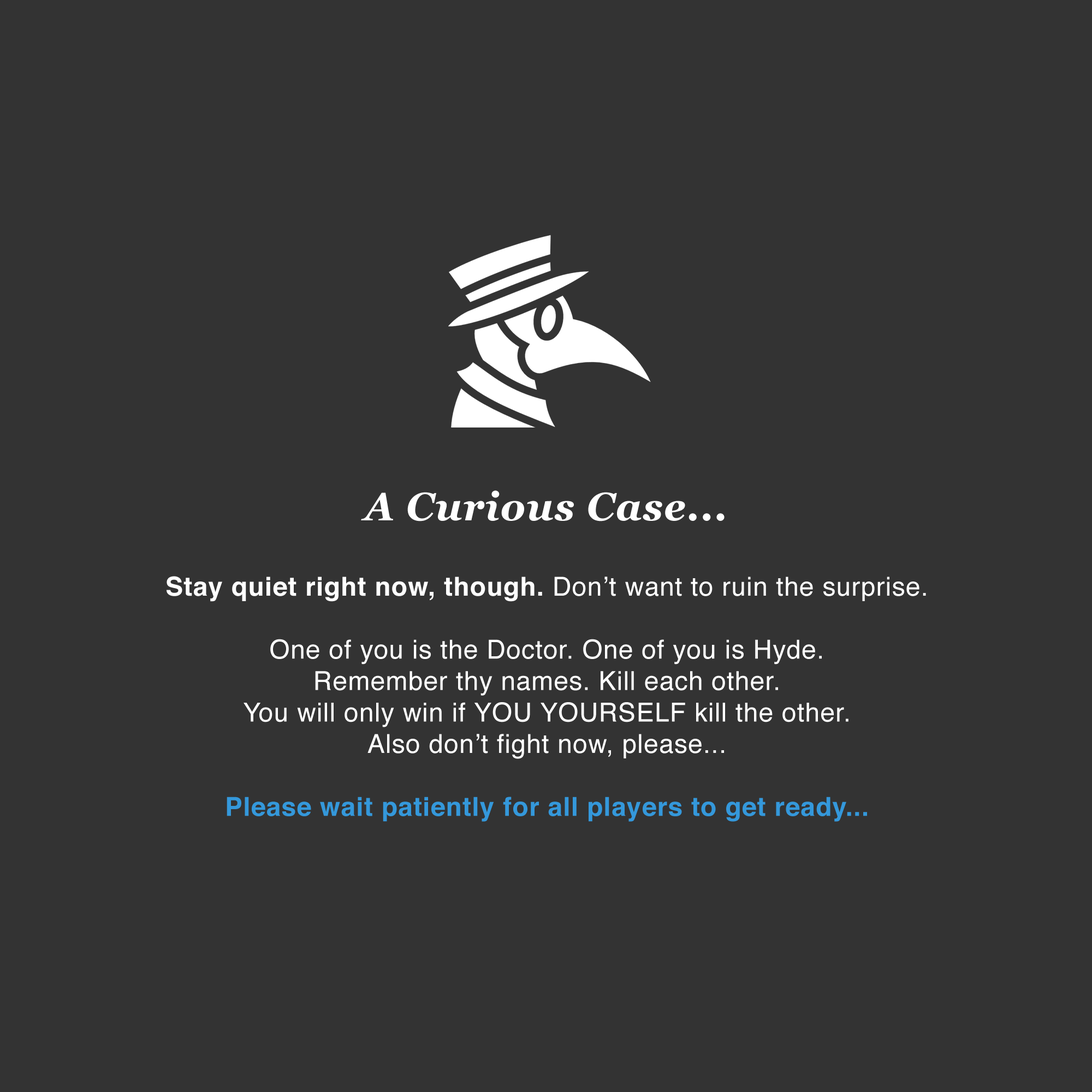
<style>
.page{position:relative;width:1092px;height:1092px;background:#333333}
.page>*{position:absolute;margin:0}
.t1{font:39.3px "Georgia-BoldItalic";letter-spacing:0.025em;color:#ffffff}
.t2{font:26.2px "Helvetica";letter-spacing:0.025em;color:#ffffff}
.t3{font:26.2px "Helvetica-Bold";letter-spacing:0.025em;color:#ffffff}
.t4{font:26.2px "Helvetica-Bold";letter-spacing:0.025em;color:#3498db}
</style>
<div class="page">
<p class="t1" style="left:361px;top:490px;width:364px;height:31px">A Curious Case...</p>
<p class="t2" style="left:167px;top:576px;width:759px;height:246px;text-align:center"><span class="t3">Stay quiet right now, though.</span> Don’t want to ruin the surprise.<br><br>One of you is the Doctor. One of you is Hyde.<br>Remember thy names. Kill each other.<br>You will only win if YOU YOURSELF kill the other.<br>Also don’t fight now, please...<br><br><span class="t4">Please wait patiently for all players to get ready...</span></p>
</div>
